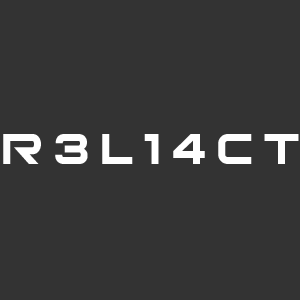
<style>
.page{position:relative;width:300px;height:300px;background:#333333}
.page>*{position:absolute;margin:0}
.t1{font:58.3px "Bitsumishi";letter-spacing:0.2em;color:#ffffff}
</style>
<div class="page">
<p class="t1" style="left:3px;top:134px;width:296px;height:30px">R3l14ct</p>
</div>
